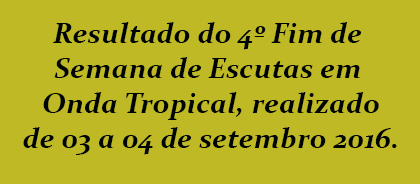
<style>
.page{position:relative;width:420px;height:184px;background:#beb925}
.page>*{position:absolute;margin:0}
.t1{font:29.2px "Constantia-BoldItalic";color:#000402}
</style>
<div class="page">
<p class="t1" style="left:23px;top:22px;width:374px;height:133px;text-align:center">Resultado do 4º Fim de <br>Semana de Escutas em <br>Onda Tropical, realizado<br>de 03 a 04 de setembro 2016.</p>
</div>
